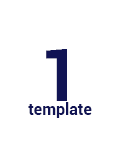
<style>
.page{position:relative;width:119px;height:168px;background:#ffffff}
.page>*{position:absolute;margin:0}
.t1{font:16px/14px "Roboto-Bold";color:#111454}
.t2{font:72px/14px "Roboto-Bold";color:#111454}
</style>
<div class="page">
<p class="t1" style="left:28px;top:49px;width:64px;height:69px;text-align:center"><span class="t2">1<br></span>template</p>
</div>
